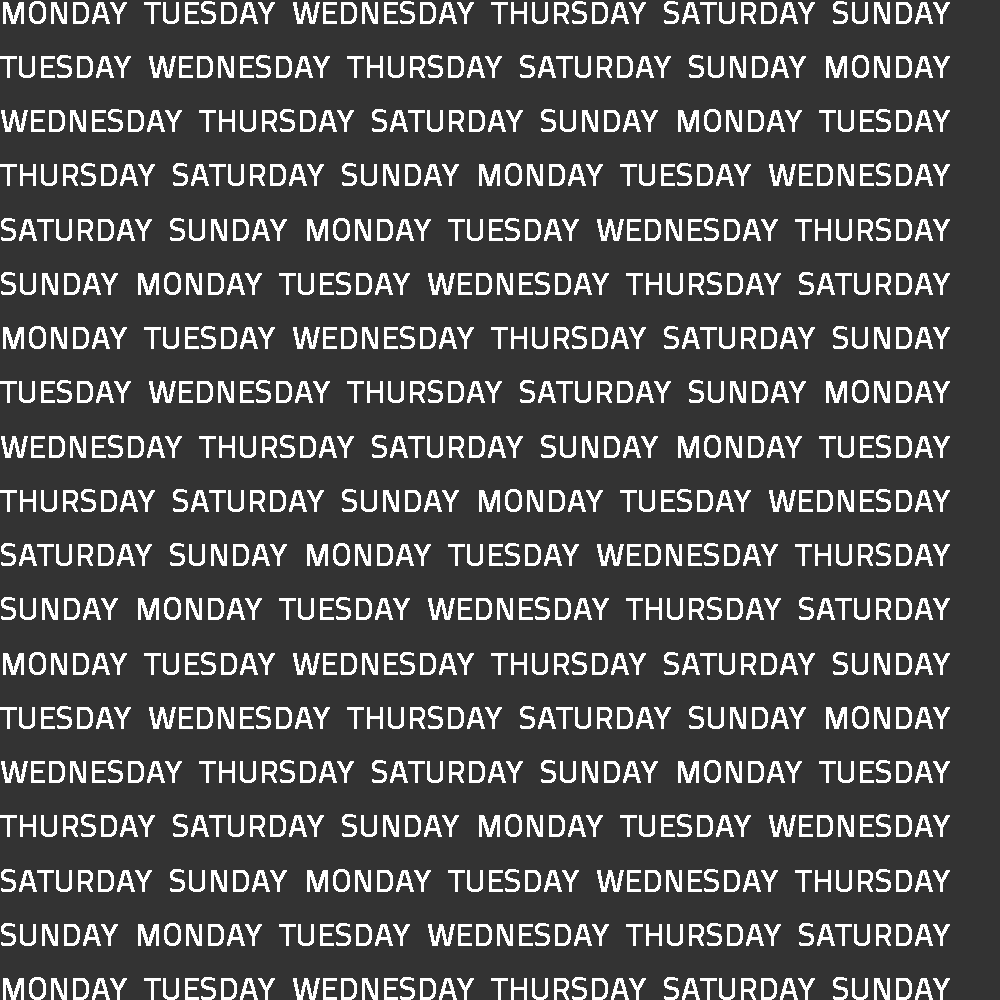
<style>
.page{position:relative;width:1000px;height:1000px;background:#333333}
.page>*{position:absolute;margin:0}
.t1{font:31px "Sunflower-Light";color:#ffffff;font-weight:bold}
</style>
<div class="page">
<p class="t1" style="left:0px;top:1px;width:950px;height:999px">MONDAY  TUESDAY  WEDNESDAY  THURSDAY  SATURDAY  SUNDAY<br>TUESDAY  WEDNESDAY  THURSDAY  SATURDAY  SUNDAY  MONDAY<br>WEDNESDAY  THURSDAY  SATURDAY  SUNDAY  MONDAY  TUESDAY<br>THURSDAY  SATURDAY  SUNDAY  MONDAY  TUESDAY  WEDNESDAY<br>SATURDAY  SUNDAY  MONDAY  TUESDAY  WEDNESDAY  THURSDAY <br>SUNDAY  MONDAY  TUESDAY  WEDNESDAY  THURSDAY  SATURDAY<br>MONDAY  TUESDAY  WEDNESDAY  THURSDAY  SATURDAY  SUNDAY<br>TUESDAY  WEDNESDAY  THURSDAY  SATURDAY  SUNDAY  MONDAY<br>WEDNESDAY  THURSDAY  SATURDAY  SUNDAY  MONDAY  TUESDAY<br>THURSDAY  SATURDAY  SUNDAY  MONDAY  TUESDAY  WEDNESDAY<br>SATURDAY  SUNDAY  MONDAY  TUESDAY  WEDNESDAY  THURSDAY <br>SUNDAY  MONDAY  TUESDAY  WEDNESDAY  THURSDAY  SATURDAY<br>MONDAY  TUESDAY  WEDNESDAY  THURSDAY  SATURDAY  SUNDAY<br>TUESDAY  WEDNESDAY  THURSDAY  SATURDAY  SUNDAY  MONDAY<br>WEDNESDAY  THURSDAY  SATURDAY  SUNDAY  MONDAY  TUESDAY<br>THURSDAY  SATURDAY  SUNDAY  MONDAY  TUESDAY  WEDNESDAY<br>SATURDAY  SUNDAY  MONDAY  TUESDAY  WEDNESDAY  THURSDAY <br>SUNDAY  MONDAY  TUESDAY  WEDNESDAY  THURSDAY  SATURDAY<br>MONDAY  TUESDAY  WEDNESDAY  THURSDAY  SATURDAY  SUNDAY<br>TUESDAY  WEDNESDAY  THURSDAY  SATURDAY  SUNDAY  MONDAY<br>WEDNESDAY  THURSDAY  SATURDAY  SUNDAY  MONDAY  TUESDAY<br>THURSDAY  SATURDAY  SUNDAY  MONDAY  TUESDAY  WEDNESDAY<br>SATURDAY  SUNDAY  MONDAY  TUESDAY  WEDNESDAY  THURSDAY <br>SUNDAY  MONDAY  TUESDAY  WEDNESDAY  THURSDAY  SATURDAY</p>
</div>
